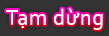
<style>
.page{position:relative;width:109px;height:36px;background:#333333}
.page>*{position:absolute;margin:0}
.t1{font:22px "Corbel";letter-spacing:0.035em;color:#ffffff}
</style>
<div class="page">
<p class="t1" style="left:6px;top:8px;width:97px;height:22px">Tạm dừng</p>
</div>
